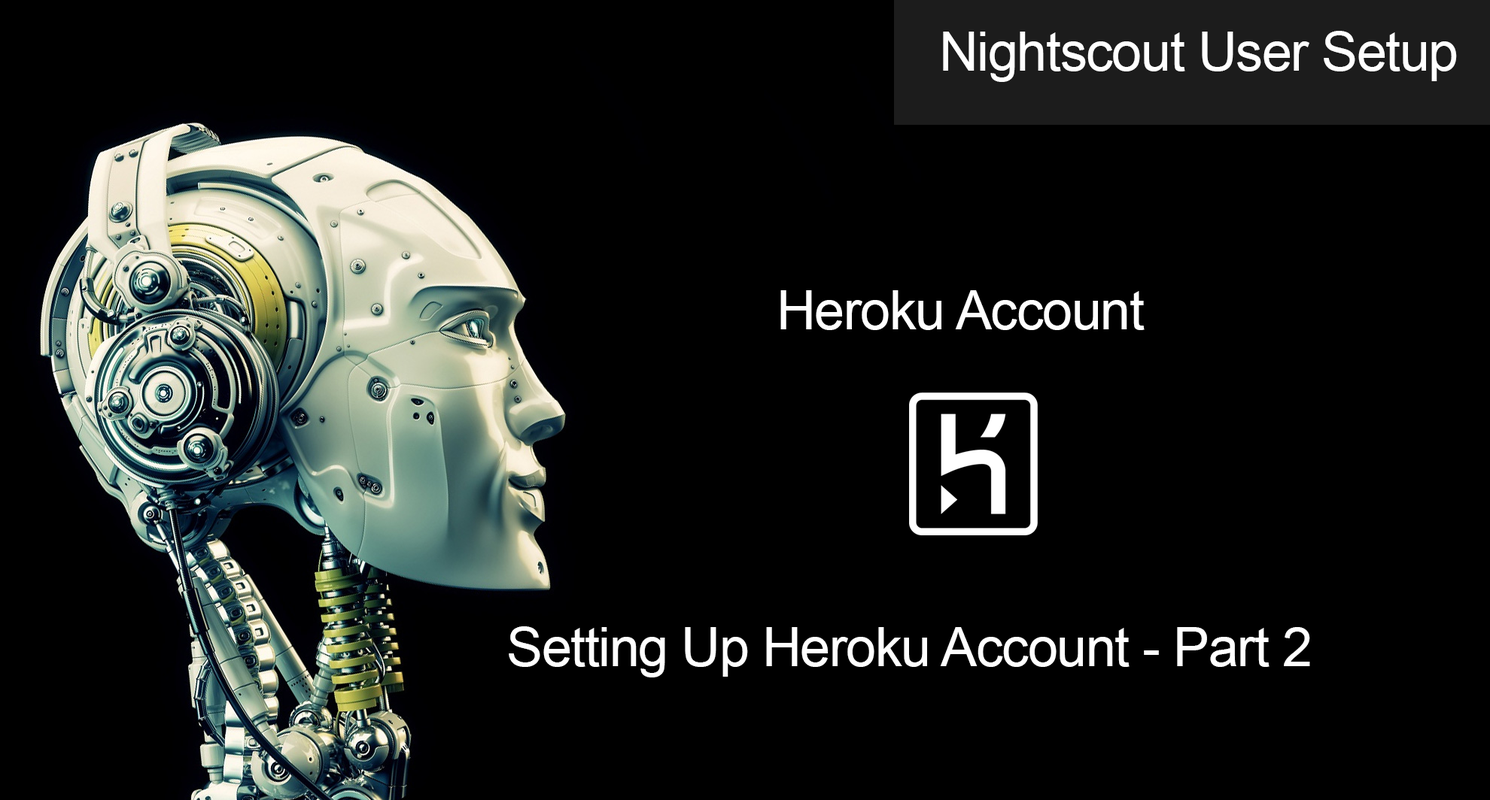
<style>
.page{position:relative;width:1490px;height:800px;background:#000000}
.page>*{position:absolute;margin:0}
.t1{font:54.2px "ArialMT";letter-spacing:-0.021em;color:#ffffff}
</style>
<div class="page">
<p class="t1" style="left:943px;top:31px;width:514px;height:51px">Nightscout User Setup</p>
<p class="t1" style="left:780px;top:290px;width:364px;height:40px">Heroku Account</p>
<p class="t1" style="left:509px;top:627px;width:801px;height:51px">Setting Up Heroku Account - Part 2</p>
</div>
